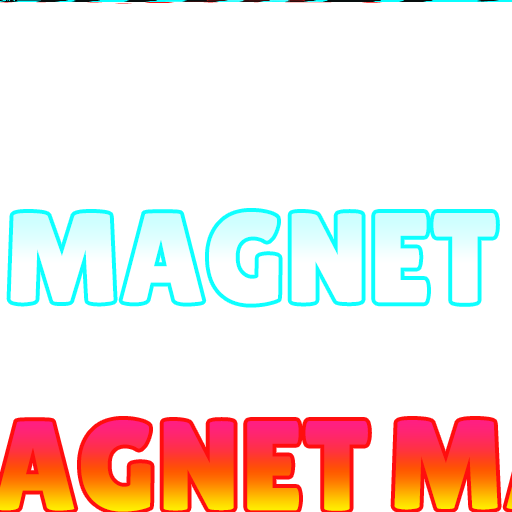
<style>
.page{position:relative;width:512px;height:512px;background:#ffffff}
.page>*{position:absolute;margin:0}
.t1{font:127px "LilitaOne";letter-spacing:0.01em}
</style>
<div class="page">
<p class="t1" style="left:10px;top:210px;width:486px;height:92px">MAGNET</p>
</div>
